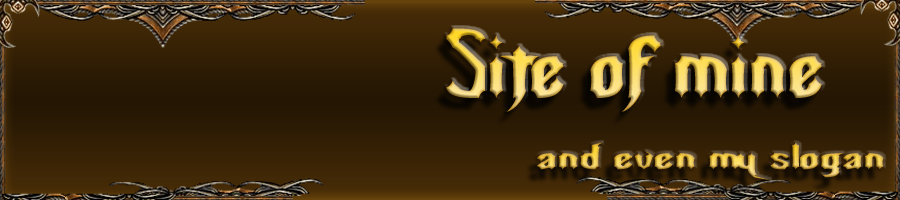
<style>
.page{position:relative;width:900px;height:200px}
.page>*{position:absolute;margin:0}
.t1{font:91.6px "NightwarriorNormal";scale:0.93 1}
.t2{font:34.9px "NightwarriorNormal";scale:1.37 1}
</style>
<div class="page">
<p class="t1" style="left:446px;top:28px;width:376px;height:84px">Site of mine</p>
<p class="t2" style="left:537px;top:142px;width:347px;height:38px">and even my slogan</p>
</div>
